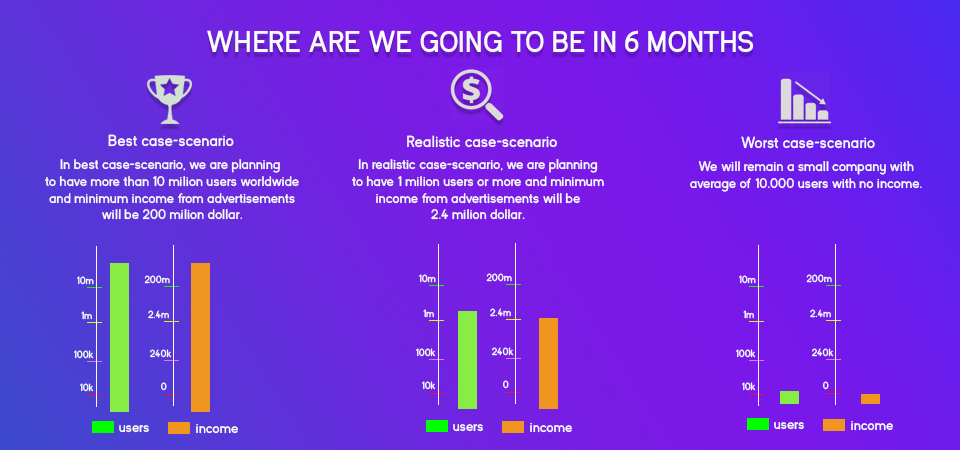
<style>
.page{position:relative;width:960px;height:450px}
.page>*{position:absolute;margin:0}
.t1{font:30px "KayakSans-Bold";color:#fcfbfa}
.t2{font:16px "KayakSans-Bold";color:#fcfbfa}
.t3{font:14px "KayakSans-Bold";color:#fcfbfa}
.t4{font:10.2px "KayakSans-Bold";color:#fcfbfa}
</style>
<div class="page">
<p class="t1" style="left:207px;top:30px;width:546px;height:22px">WHERE ARE WE GOING TO BE IN 6 MONTHS</p>
<p class="t2" style="left:108px;top:134px;width:126px;height:13px">Best case-scenario</p>
<p class="t2" style="left:407px;top:135px;width:150px;height:13px">Realistic case-scenario</p>
<p class="t2" style="left:741px;top:136px;width:134px;height:13px">Worst case-scenario</p>
<p class="t3" style="left:45px;top:159px;width:254px;height:61px;text-align:center">In best case-scenario, we are planning <br>to have more than 10 milion users worldwide<br>and minimum income from advertisements<br>will be 200 milion dollar.</p>
<p class="t3" style="left:352px;top:159px;width:252px;height:61px;text-align:center">In realistic case-scenario, we are planning<br>to have 1 milion users or more and minimum<br>income from advertisements will be<br>2.4 milion dollar.</p>
<p class="t3" style="left:690px;top:161px;width:232px;height:31px;text-align:center">We will remain a small company with<br>average of 10.000 users with no income.</p>
<p class="t4" style="left:77px;top:276px;width:17px;height:9px">10m</p>
<p class="t4" style="left:144px;top:275px;width:26px;height:9px">200m</p>
<p class="t4" style="left:419px;top:274px;width:17px;height:9px">10m</p>
<p class="t4" style="left:486px;top:273px;width:26px;height:9px">200m</p>
<p class="t4" style="left:739px;top:275px;width:17px;height:9px">10m</p>
<p class="t4" style="left:806px;top:274px;width:26px;height:9px">200m</p>
<p class="t4" style="left:81px;top:311px;width:11px;height:9px">1m</p>
<p class="t4" style="left:148px;top:310px;width:21px;height:9px">2.4m</p>
<p class="t4" style="left:423px;top:309px;width:11px;height:9px">1m</p>
<p class="t4" style="left:490px;top:308px;width:21px;height:9px">2.4m</p>
<p class="t4" style="left:743px;top:310px;width:11px;height:9px">1m</p>
<p class="t4" style="left:810px;top:309px;width:21px;height:9px">2.4m</p>
<p class="t4" style="left:74px;top:350px;width:20px;height:9px">100k</p>
<p class="t4" style="left:150px;top:349px;width:22px;height:9px">240k</p>
<p class="t4" style="left:416px;top:348px;width:20px;height:9px">100k</p>
<p class="t4" style="left:492px;top:347px;width:22px;height:9px">240k</p>
<p class="t4" style="left:736px;top:349px;width:20px;height:9px">100k</p>
<p class="t4" style="left:812px;top:348px;width:22px;height:9px">240k</p>
<p class="t4" style="left:80px;top:383px;width:14px;height:9px">10k</p>
<p class="t4" style="left:161px;top:382px;width:6px;height:9px">0</p>
<p class="t4" style="left:422px;top:381px;width:14px;height:9px">10k</p>
<p class="t4" style="left:503px;top:380px;width:6px;height:9px">0</p>
<p class="t4" style="left:742px;top:382px;width:14px;height:9px">10k</p>
<p class="t4" style="left:823px;top:381px;width:6px;height:9px">0</p>
<p class="t3" style="left:119px;top:425px;width:30px;height:8px">users</p>
<p class="t3" style="left:196px;top:424px;width:42px;height:10px">income</p>
<p class="t3" style="left:453px;top:424px;width:30px;height:8px">users</p>
<p class="t3" style="left:530px;top:423px;width:42px;height:10px">income</p>
<p class="t3" style="left:774px;top:422px;width:30px;height:8px">users</p>
<p class="t3" style="left:851px;top:421px;width:42px;height:10px">income</p>
</div>
